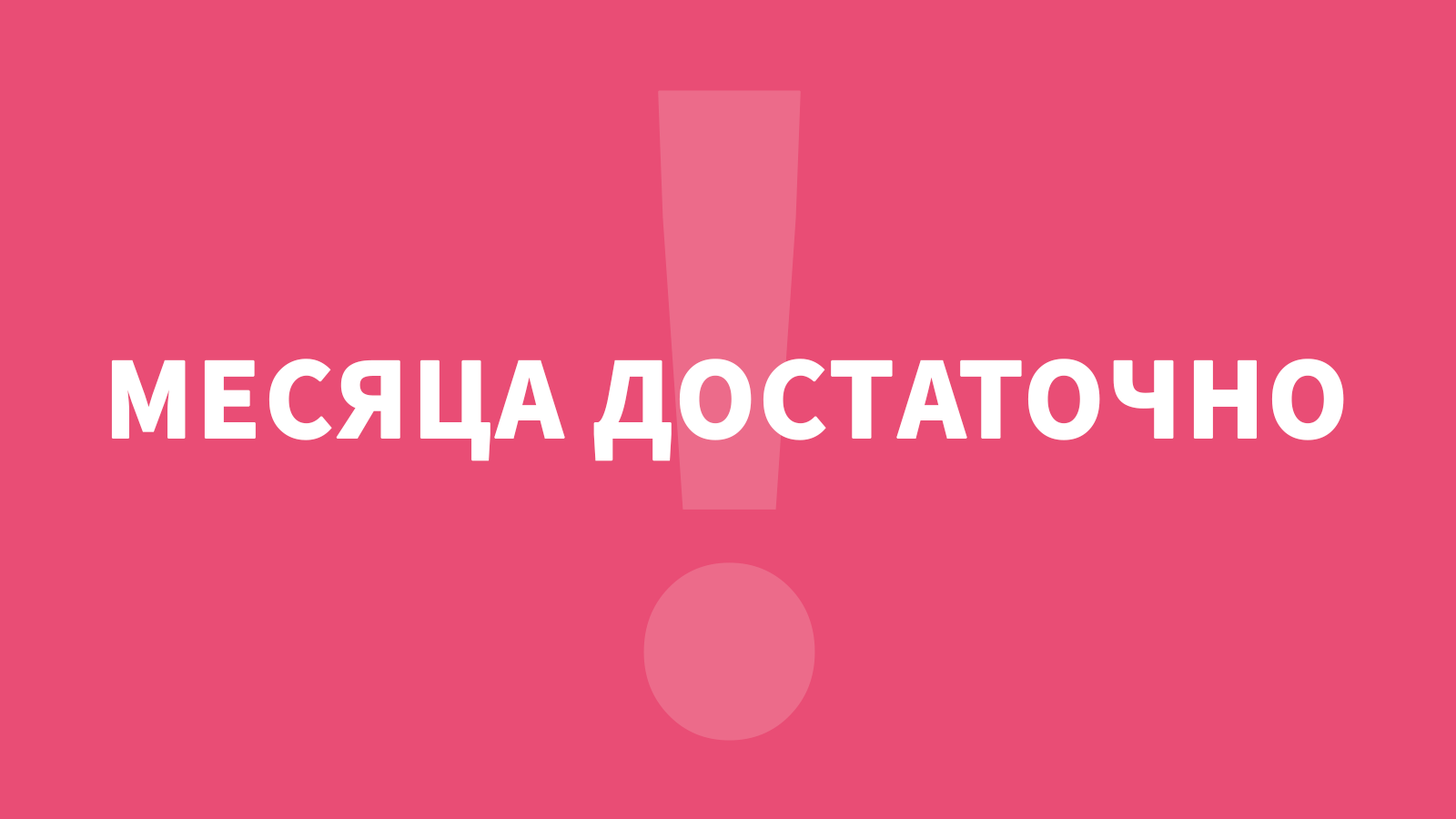
<style>
.page{position:relative;width:1456px;height:819px;background:#e94d75}
.page>*{position:absolute;margin:0}
.t1{font:117.8px "SourceSansPro-Bold";color:#ffffff;text-transform:uppercase;font-weight:bold}
</style>
<div class="page">
<p class="t1" style="left:111px;top:359px;width:1233px;height:102px">Месяца достаточно</p>
</div>
